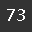
<style>
.page{position:relative;width:32px;height:32px;background:#333333}
.page>*{position:absolute;margin:0}
.t1{font:17.8px "MyriadPro-Regular";color:#ffffff;scale:1.12 1}
</style>
<div class="page">
<p class="t1" style="left:7px;top:9px;width:18px;height:12px">73</p>
</div>
